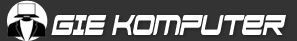
<style>
.page{position:relative;width:297px;height:41px;background:#333333}
.page>*{position:absolute;margin:0}
.t1{font:38.9px "Siegra-Regular";color:#ffffff;scale:0.64 1}
</style>
<div class="page">
<p class="t1" style="left:51px;top:15px;width:235px;height:20px">GIE komputer</p>
</div>
